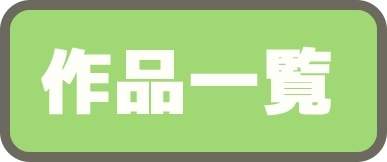
<style>
.page{position:relative;width:387px;height:162px;background:#a0d873}
.page>*{position:absolute;margin:0}
.t1{font:72px "07LightNovelPOP";color:#fefff9;font-weight:bold}
</style>
<div class="page">
<p class="t1" style="left:41px;top:46px;width:290px;height:70px">作品一覧</p>
</div>
